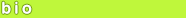
<style>
.page{position:relative;width:186px;height:18px;background:#bff73b}
.page>*{position:absolute;margin:0}
.t1{font:16px "Swiss721BT-BoldRounded";letter-spacing:0.2em;color:#ffffff}
</style>
<div class="page">
<p class="t1" style="left:2px;top:1px;width:30px;height:13px">bio</p>
</div>
